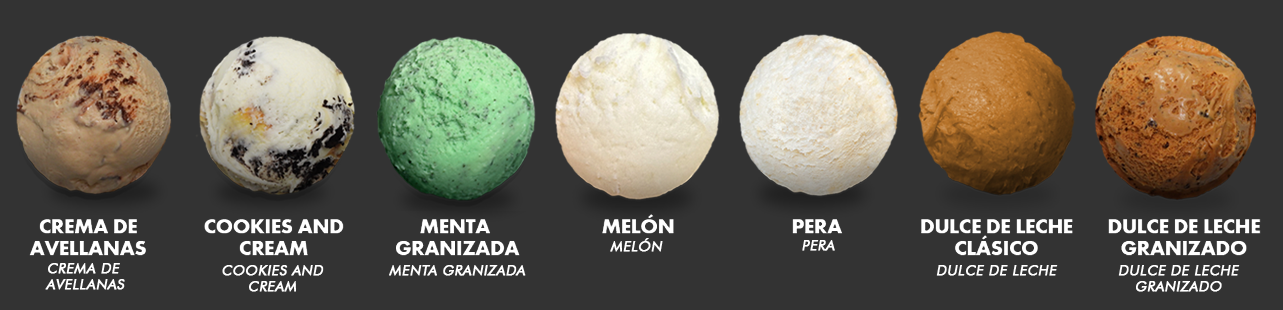
<style>
.page{position:relative;width:1283px;height:310px;background:#333333}
.page>*{position:absolute;margin:0}
.t1{font:14px "FuturaBT-Book";letter-spacing:0.02em;color:#ffffff;text-transform:uppercase;font-weight:bold;font-style:italic}
</style>
<div class="page">
<p class="t1" style="left:610px;top:238px;width:53px;height:14px">melón</p>
<p class="t1" style="left:802px;top:240px;width:33px;height:11px">pera</p>
<p class="t1" style="left:45px;top:263px;width:80px;height:27px;text-align:center">Crema de <br>avellanas</p>
<p class="t1" style="left:222px;top:265px;width:102px;height:27px;text-align:center">cookies and<br>cream</p>
<p class="t1" style="left:389px;top:265px;width:137px;height:11px">menta granizada</p>
<p class="t1" style="left:936px;top:265px;width:122px;height:11px">Dulce de leche</p>
<p class="t1" style="left:1118px;top:265px;width:122px;height:27px;text-align:center">Dulce de leche<br>granizado</p>
</div>
